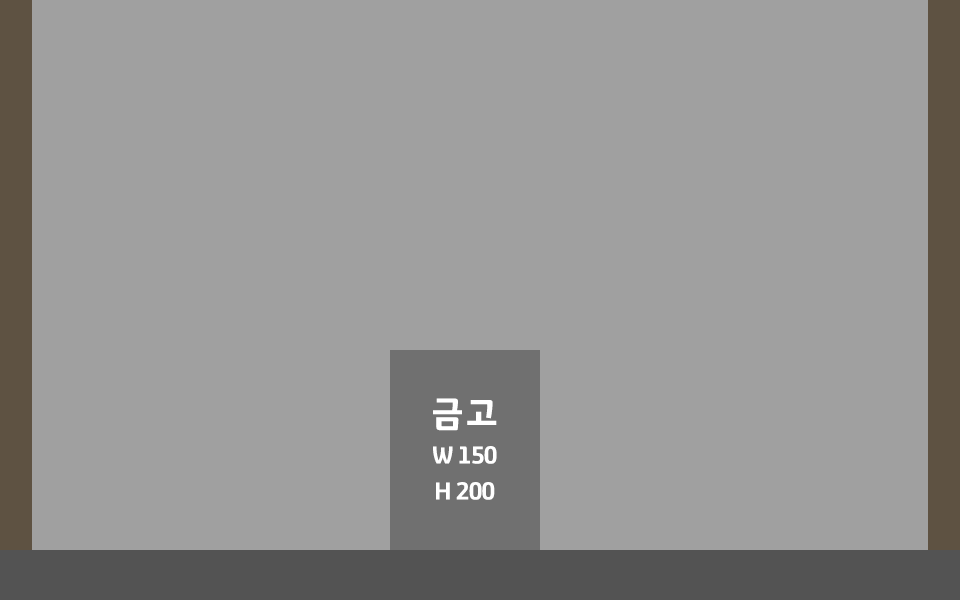
<style>
.page{position:relative;width:960px;height:600px;background:#a0a0a0}
.page>*{position:absolute;margin:0}
.t1{font:24px/36px "GyeonggiTitleV";letter-spacing:-0.05em;color:#ffffff}
.t2{font:36px/12px "GyeonggiTitleV";letter-spacing:-0.05em;color:#ffffff}
</style>
<div class="page">
<p class="t1" style="left:433px;top:398px;width:64px;height:102px;text-align:center"><span class="t2">금고<br><br><br><br></span>W 150<br>H 200</p>
</div>
